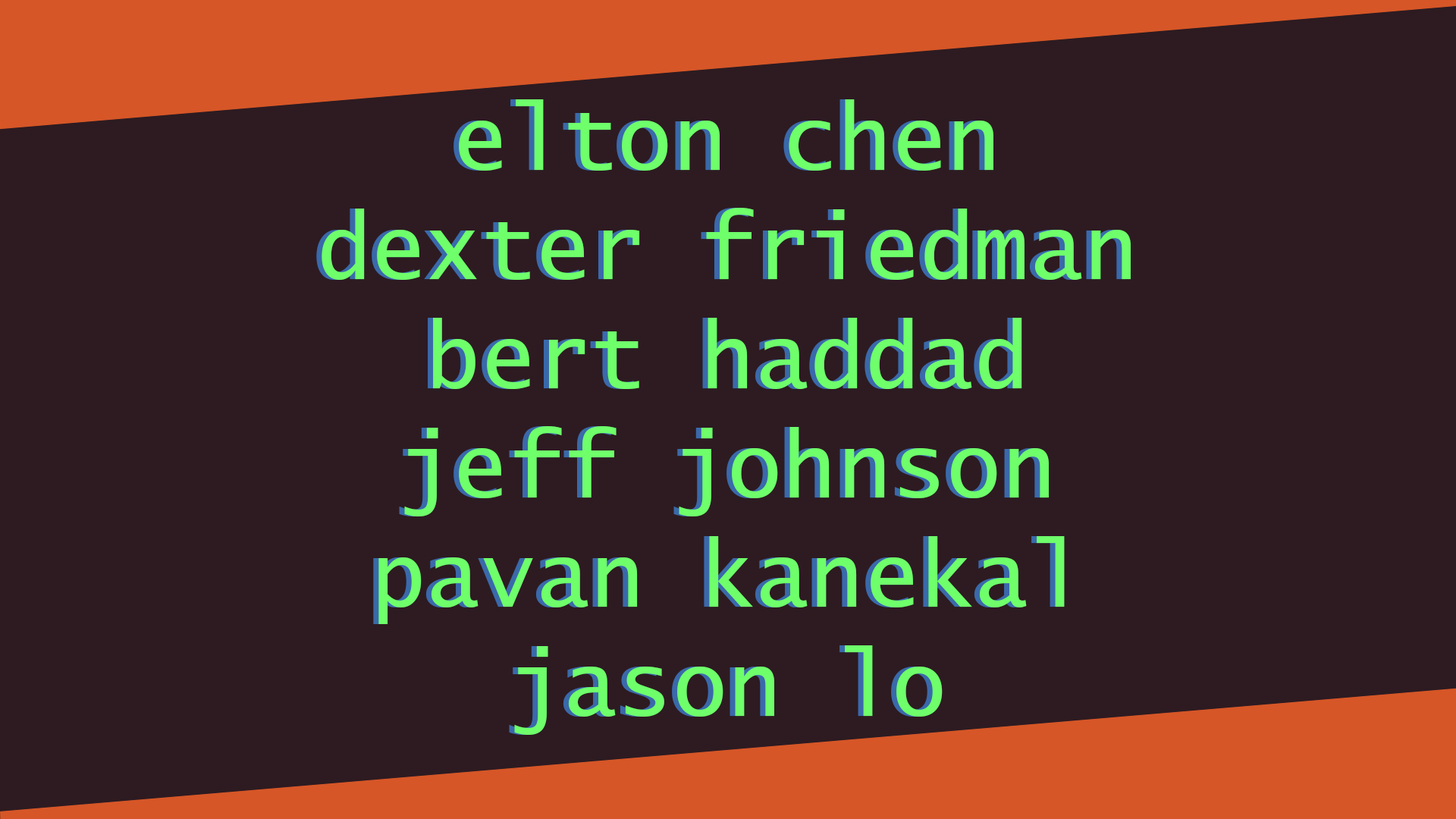
<style>
.page{position:relative;width:1456px;height:819px;background:#2d1b21}
.page>*{position:absolute;margin:0}
.t1{font:91px "LucidaConsole"}
.t2{font:91px "LucidaConsole";color:#6fff6b}
</style>
<div class="page">
<p class="t1" style="left:316px;top:99px;width:809px;height:636px;text-align:center">elton chen<br>dexter friedman<br>bert haddad<br>jeff johnson<br>pavan kanekal<br>jason lo</p>
<p class="t2" style="left:322px;top:99px;width:809px;height:636px;text-align:center">elton chen<br>dexter friedman<br>bert haddad<br>jeff johnson<br>pavan kanekal<br>jason lo</p>
</div>
